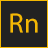
<style>
.page{position:relative;width:48px;height:48px;background:#222222}
.page>*{position:absolute;margin:0}
.t1{font:28px "MyriadPro-Regular";letter-spacing:0.02em;color:#f3b803}
</style>
<div class="page">
<p class="t1" style="left:10px;top:13px;width:28px;height:20px">Rn</p>
</div>
